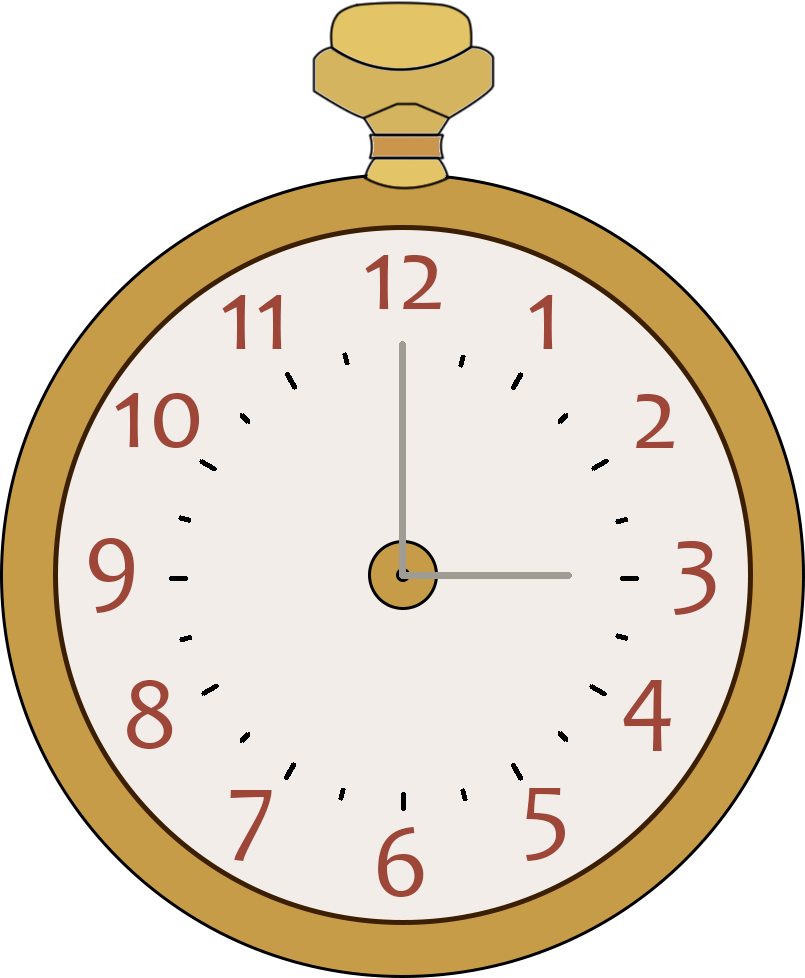
<style>
.page{position:relative;width:805px;height:978px;background:#f2ede9}
.page>*{position:absolute;margin:0}
.t1{font:104.2px "Candara";color:#9e4638}
</style>
<div class="page">
<p class="t1" style="left:365px;top:255px;width:76px;height:54px">12</p>
<p class="t1" style="left:222px;top:295px;width:60px;height:54px">11</p>
<p class="t1" style="left:529px;top:295px;width:24px;height:54px">1</p>
<p class="t1" style="left:115px;top:393px;width:85px;height:55px">10</p>
<p class="t1" style="left:636px;top:394px;width:38px;height:54px">2</p>
<p class="t1" style="left:89px;top:538px;width:45px;height:75px">9</p>
<p class="t1" style="left:674px;top:541px;width:42px;height:74px">3</p>
<p class="t1" style="left:127px;top:680px;width:46px;height:69px">8</p>
<p class="t1" style="left:623px;top:680px;width:48px;height:71px">4</p>
<p class="t1" style="left:230px;top:790px;width:42px;height:71px">7</p>
<p class="t1" style="left:526px;top:788px;width:39px;height:73px">5</p>
<p class="t1" style="left:378px;top:827px;width:46px;height:70px">6</p>
</div>
